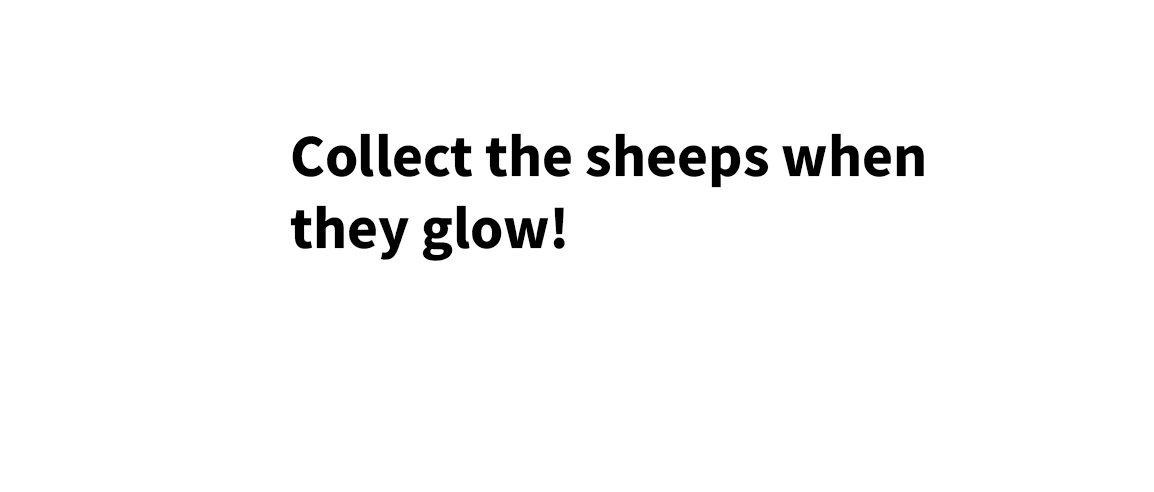
<style>
.page{position:relative;width:1154px;height:492px;background:#ffffff}
.page>*{position:absolute;margin:0}
.t1{font:60px "SourceSansRoman-Bold";color:#000000}
</style>
<div class="page">
<p class="t1" style="left:290px;top:133px;width:634px;height:128px">Collect the sheeps when<br>they glow!</p>
</div>
